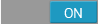
<style>
.page{position:relative;width:99px;height:24px;background:#999999}
.page>*{position:absolute;margin:0}
.t1{font:14px "Roboto-Regular";letter-spacing:-0.025em;color:#ffffff}
</style>
<div class="page">
<p class="t1" style="left:64px;top:8px;width:18px;height:10px">ON</p>
</div>
